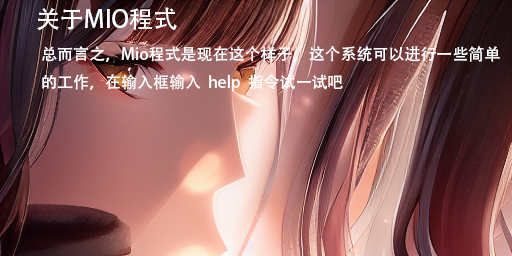
<style>
.page{position:relative;width:512px;height:256px}
.page>*{position:absolute;margin:0}
.t1{font:24px "AdobeHeitiStd-Regular";color:#ffffff}
.t2{font:16px "AdobeHeitiStd-Regular";color:#ffffff}
</style>
<div class="page">
<p class="t1" style="left:37px;top:7px;width:140px;height:24px">关于MIO程式</p>
<p class="t2" style="left:42px;top:46px;width:458px;height:46px">总而言之，Mio程式是现在这个样子，这个系统可以进行一些简单<br>的工作，在输入框输入  help  指令试一试吧</p>
</div>
